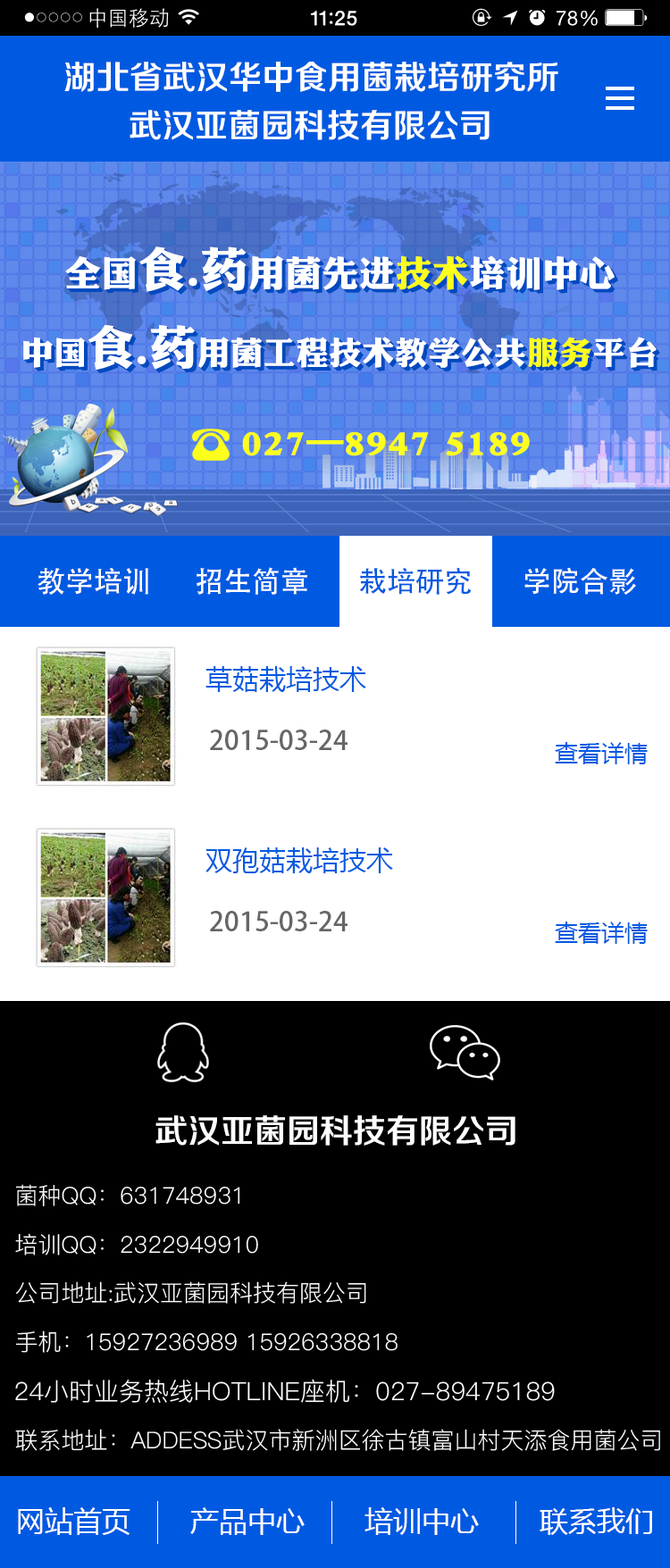
<style>
.page{position:relative;width:670px;height:1568px;background:#000000}
.page>*{position:absolute;margin:0}
.t1{font:33px "FZZZHONGJW--GB1-0";color:#ffffff}
.t2{font:28.6px "AdobeHeitiStd-Regular";color:#ffffff}
.t3{font:28.6px "AdobeHeitiStd-Regular";color:#005ae1}
.t4{font:26.8px "MicrosoftYaHei";color:#005ae1}
.t5{font:26.8px "AdobeHeitiStd-Regular";color:#666666}
.t6{font:23.2px "MicrosoftYaHei";color:#005ae1}
.t7{font:23.2px "PingFang-SC-Regular";color:#ffffff}
.t8{font:25px "PingFang-SC-Regular";color:#ffffff}
.t9{font:28.6px "MicrosoftYaHei";color:#ffffff}
</style>
<div class="page">
<p class="t1" style="left:64px;top:62px;width:494px;height:30px">湖北省武汉华中食用菌栽培研究所</p>
<p class="t1" style="left:129px;top:110px;width:360px;height:30px">武汉亚菌园科技有限公司</p>
<p class="t2" style="left:38px;top:567px;width:111px;height:28px">教学培训</p>
<p class="t2" style="left:196px;top:567px;width:111px;height:28px">招生简章</p>
<p class="t3" style="left:359px;top:567px;width:112px;height:28px">栽培研究</p>
<p class="t2" style="left:524px;top:567px;width:112px;height:28px">学院合影</p>
<p class="t4" style="left:205px;top:666px;width:161px;height:26px">草菇栽培技术</p>
<p class="t5" style="left:210px;top:730px;width:137px;height:20px">2015-03-24</p>
<p class="t6" style="left:555px;top:742px;width:92px;height:22px">查看详情</p>
<p class="t4" style="left:205px;top:847px;width:188px;height:26px">双孢菇栽培技术</p>
<p class="t5" style="left:210px;top:911px;width:137px;height:20px">2015-03-24</p>
<p class="t6" style="left:555px;top:922px;width:92px;height:22px">查看详情</p>
<p class="t1" style="left:155px;top:1115px;width:360px;height:31px">武汉亚菌园科技有限公司</p>
<p class="t7" style="left:15px;top:1184px;width:225px;height:22px">菌种QQ：631748931</p>
<p class="t7" style="left:15px;top:1233px;width:243px;height:22px">培训QQ：2322949910</p>
<p class="t7" style="left:15px;top:1281px;width:351px;height:23px">公司地址:武汉亚菌园科技有限公司</p>
<p class="t7" style="left:15px;top:1330px;width:382px;height:23px">手机：15927236989 15926338818</p>
<p class="t8" style="left:15px;top:1379px;width:540px;height:24px">24小时业务热线HOTLINE座机：027-89475189</p>
<p class="t7" style="left:15px;top:1429px;width:645px;height:22px">联系地址：ADDESS武汉市新洲区徐古镇富山村天添食用菌公司</p>
<p class="t9" style="left:18px;top:1507px;width:112px;height:28px">网站首页</p>
<p class="t9" style="left:190px;top:1507px;width:114px;height:28px">产品中心</p>
<p class="t9" style="left:364px;top:1507px;width:115px;height:28px">培训中心</p>
<p class="t9" style="left:539px;top:1507px;width:113px;height:28px">联系我们</p>
</div>
